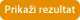
<style>
.page{position:relative;width:80px;height:20px;background:#e68d00}
.page>*{position:absolute;margin:0}
.t1{font:11px "MyriadPro-Semibold";color:#ffffff}
</style>
<div class="page">
<p class="t1" style="left:5px;top:5px;width:70px;height:8px">Prikaži rezultat</p>
</div>
